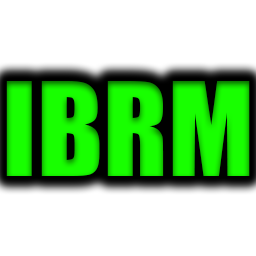
<style>
.page{position:relative;width:256px;height:256px;background:#ffffff}
.page>*{position:absolute;margin:0}
.t1{font:120px "Impact";color:#18ff00}
</style>
<div class="page">
<p class="t1" style="left:6px;top:81px;width:244px;height:95px">IBRM</p>
</div>
